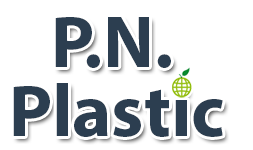
<style>
.page{position:relative;width:253px;height:150px;background:#ffffff}
.page>*{position:absolute;margin:0}
.t1{font:74px "MyriadPro-Bold";color:#2c3e50}
</style>
<div class="page">
<p class="t1" style="left:55px;top:17px;width:116px;height:51px">P.N.</p>
<p class="t1" style="left:13px;top:83px;width:210px;height:54px">Plastic</p>
</div>
